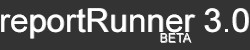
<style>
.page{position:relative;width:250px;height:50px;background:#333333}
.page>*{position:absolute;margin:0}
.t1{font:33.2px "ArialMT";color:#ffffff}
.t2{font:12.5px "ArialMT";color:#ffffff}
.t3{font:12.5px "ArialMT";color:#cbcbcb}
</style>
<div class="page">
<p class="t1" style="left:1px;top:8px;width:248px;height:31px">reportRunner 3.0</p>
<p class="t1" style="left:1px;top:8px;width:247px;height:31px">reportRunner 3.0</p>
<p class="t2" style="left:160px;top:33px;width:31px;height:9px">BETA</p>
<p class="t3" style="left:161px;top:34px;width:31px;height:9px">BETA</p>
</div>
